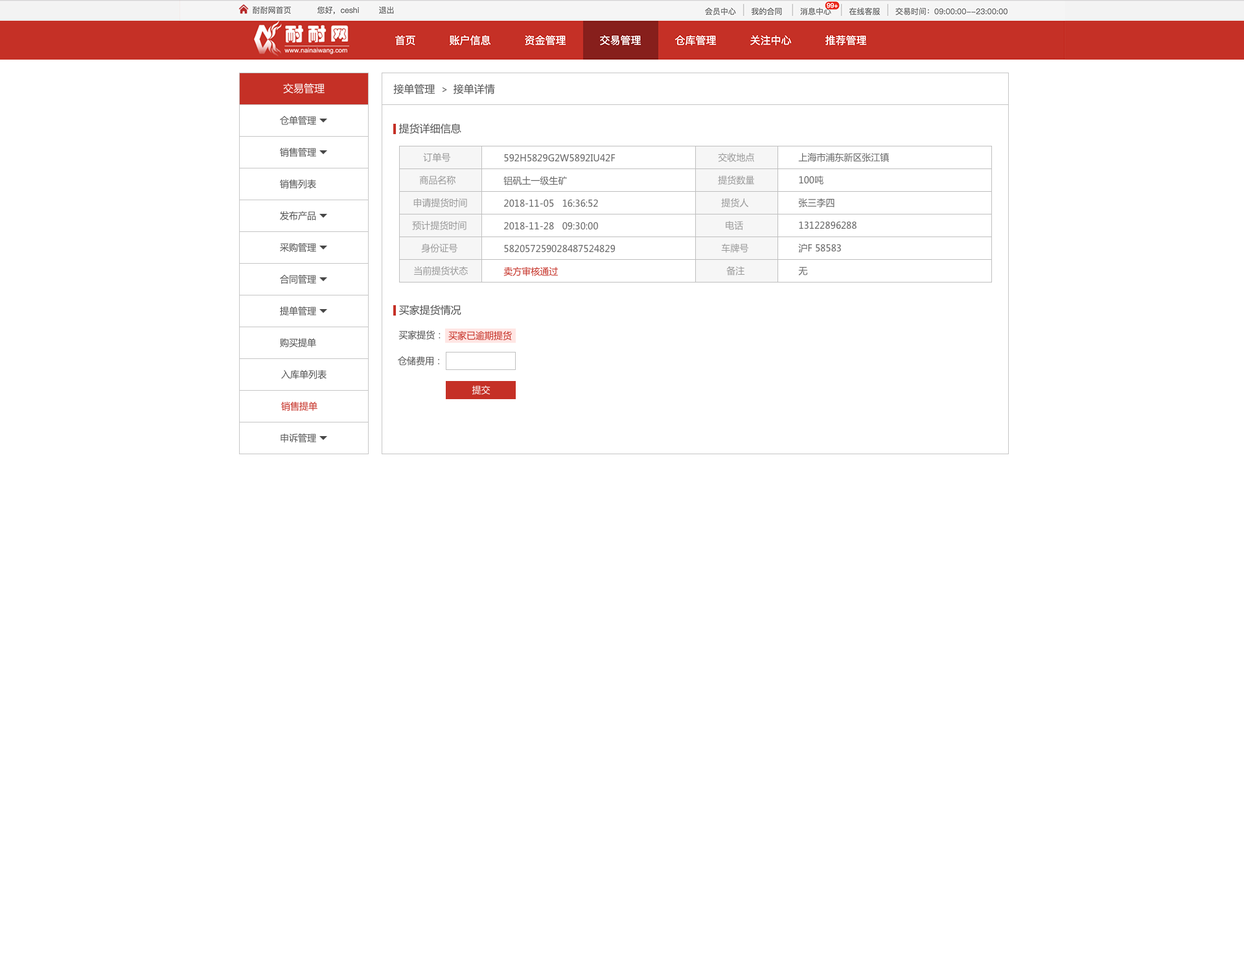
<style>
.page{position:relative;width:1244px;height:959px;background:#ffffff}
.page>*{position:absolute;margin:0}
.t1{font:10.4px "MicrosoftYaHei";color:#ffffff}
.t2{font:10.4px "MicrosoftYaHei";color:#535353}
.t3{font:9.1px "MicrosoftYaHei";color:#535353}
.t4{font:9.1px "MicrosoftYaHei";color:#999999}
.t5{font:9.1px "MicrosoftYaHei";color:#666666}
.t6{font:9.1px "MicrosoftYaHei";color:#c53026}
.t7{font:9.1px "MicrosoftYaHei";color:#ffffff}
</style>
<div class="page">
<p class="t1" style="left:283px;top:83px;width:42px;height:11px">交易管理</p>
<p class="t2" style="left:393px;top:84px;width:102px;height:11px">接单管理  <span class="t3">&gt;  </span>接单详情</p>
<p class="t3" style="left:280px;top:116px;width:36px;height:9px">仓单管理</p>
<p class="t2" style="left:398px;top:123px;width:63px;height:11px">提货详细信息</p>
<p class="t3" style="left:280px;top:148px;width:36px;height:9px">销售管理</p>
<p class="t4" style="left:423px;top:153px;width:28px;height:9px">订单号</p>
<p class="t5" style="left:504px;top:154px;width:111px;height:8px">592H5829G2W5892IU42F</p>
<p class="t4" style="left:718px;top:153px;width:36px;height:9px">交收地点</p>
<p class="t5" style="left:798px;top:153px;width:91px;height:9px">上海市浦东新区张江镇</p>
<p class="t3" style="left:280px;top:179px;width:36px;height:10px">销售列表</p>
<p class="t4" style="left:419px;top:176px;width:36px;height:9px">商品名称</p>
<p class="t5" style="left:503px;top:176px;width:64px;height:9px">铝矾土一级生矿</p>
<p class="t4" style="left:718px;top:176px;width:36px;height:9px">提货数量</p>
<p class="t5" style="left:799px;top:176px;width:24px;height:9px">100吨</p>
<p class="t4" style="left:413px;top:198px;width:54px;height:9px">申请提货时间</p>
<p class="t5" style="left:504px;top:199px;width:94px;height:8px">2018-11-05   16:36:52</p>
<p class="t4" style="left:721px;top:198px;width:27px;height:9px">提货人</p>
<p class="t5" style="left:798px;top:198px;width:36px;height:9px">张三李四</p>
<p class="t3" style="left:280px;top:211px;width:36px;height:9px">发布产品</p>
<p class="t4" style="left:412px;top:221px;width:54px;height:9px">预计提货时间</p>
<p class="t5" style="left:504px;top:222px;width:94px;height:8px">2018-11-28   09:30:00</p>
<p class="t4" style="left:726px;top:221px;width:17px;height:9px">电话</p>
<p class="t5" style="left:799px;top:221px;width:57px;height:8px">13122896288</p>
<p class="t3" style="left:280px;top:243px;width:36px;height:9px">采购管理</p>
<p class="t4" style="left:421px;top:244px;width:37px;height:9px">身份证号</p>
<p class="t5" style="left:504px;top:244px;width:111px;height:9px">582057259028487524829</p>
<p class="t4" style="left:721px;top:244px;width:28px;height:9px">车牌号</p>
<p class="t5" style="left:798px;top:244px;width:43px;height:9px">沪F 58583</p>
<p class="t4" style="left:414px;top:266px;width:54px;height:9px">当前提货状态</p>
<p class="t6" style="left:503px;top:267px;width:55px;height:9px">卖方审核通过</p>
<p class="t4" style="left:726px;top:266px;width:19px;height:9px">备注</p>
<p class="t5" style="left:798px;top:267px;width:10px;height:8px">无</p>
<p class="t3" style="left:280px;top:275px;width:36px;height:9px">合同管理</p>
<p class="t2" style="left:399px;top:304px;width:62px;height:11px">买家提货情况</p>
<p class="t3" style="left:280px;top:306px;width:36px;height:9px">提单管理</p>
<p class="t3" style="left:280px;top:338px;width:36px;height:9px">购买提单</p>
<p class="t3" style="left:398px;top:330px;width:42px;height:9px">买家提货：</p>
<p class="t6" style="left:448px;top:331px;width:64px;height:9px">买家已逾期提货</p>
<p class="t3" style="left:398px;top:356px;width:41px;height:9px">仓储费用：</p>
<p class="t3" style="left:281px;top:370px;width:45px;height:9px">入库单列表</p>
<p class="t7" style="left:472px;top:385px;width:18px;height:10px">提交</p>
<p class="t6" style="left:281px;top:402px;width:36px;height:9px">销售提单</p>
<p class="t3" style="left:280px;top:433px;width:36px;height:9px">申诉管理</p>
</div>
